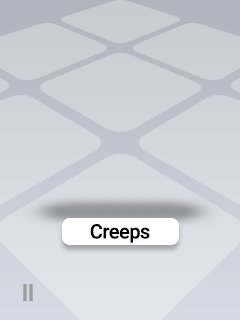
<style>
.page{position:relative;width:240px;height:320px}
.page>*{position:absolute;margin:0}
.t1{font:20px "Roboto-Medium";letter-spacing:-0.025em;color:#000000}
.t2{font:23.9px "Roboto-Bold";letter-spacing:-0.025em;color:#9d9d9f}
</style>
<div class="page">
<p class="t1" style="left:90px;top:224px;width:60px;height:19px">Creeps</p>
<p class="t2" style="left:23px;top:284px;width:10px;height:17px">II</p>
</div>
